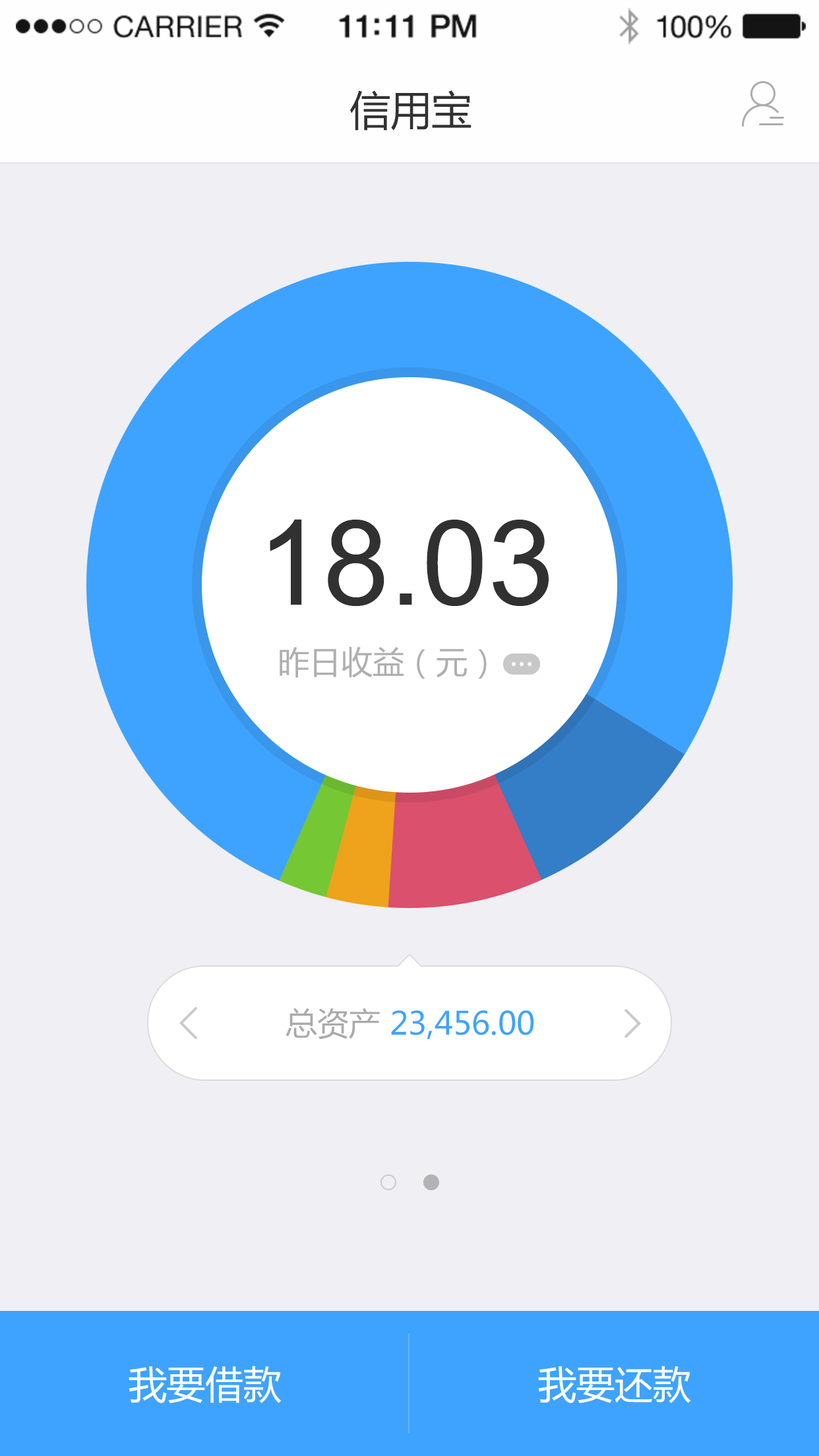
<style>
.page{position:relative;width:819px;height:1456px;background:#efeff4}
.page>*{position:absolute;margin:0}
.t1{font:40.9px "MicrosoftYaHei";color:#323232}
.t2{font:118.7px "ArialMT";color:#313131}
.t3{font:31.7px "MicrosoftYaHei";color:#afafaf}
.t4{font:31.7px "MicrosoftYaHei";color:#3ea3fe}
.t5{font:31.7px "MicrosoftYaHei";color:#abaaaa}
.t6{font:38.2px "MicrosoftYaHei";color:#ffffff}
</style>
<div class="page">
<p class="t1" style="left:350px;top:90px;width:121px;height:41px">信用宝</p>
<p class="t2" style="left:270px;top:519px;width:279px;height:87px">18.03</p>
<p class="t3" style="left:280px;top:646px;width:207px;height:33px">昨日收益（元）</p>
<p class="t4" style="left:286px;top:1008px;width:248px;height:31px"><span class="t5">总资产 </span>23,456.00</p>
<p class="t6" style="left:129px;top:1366px;width:153px;height:37px">我要借款</p>
<p class="t6" style="left:538px;top:1366px;width:153px;height:37px">我要还款</p>
</div>
